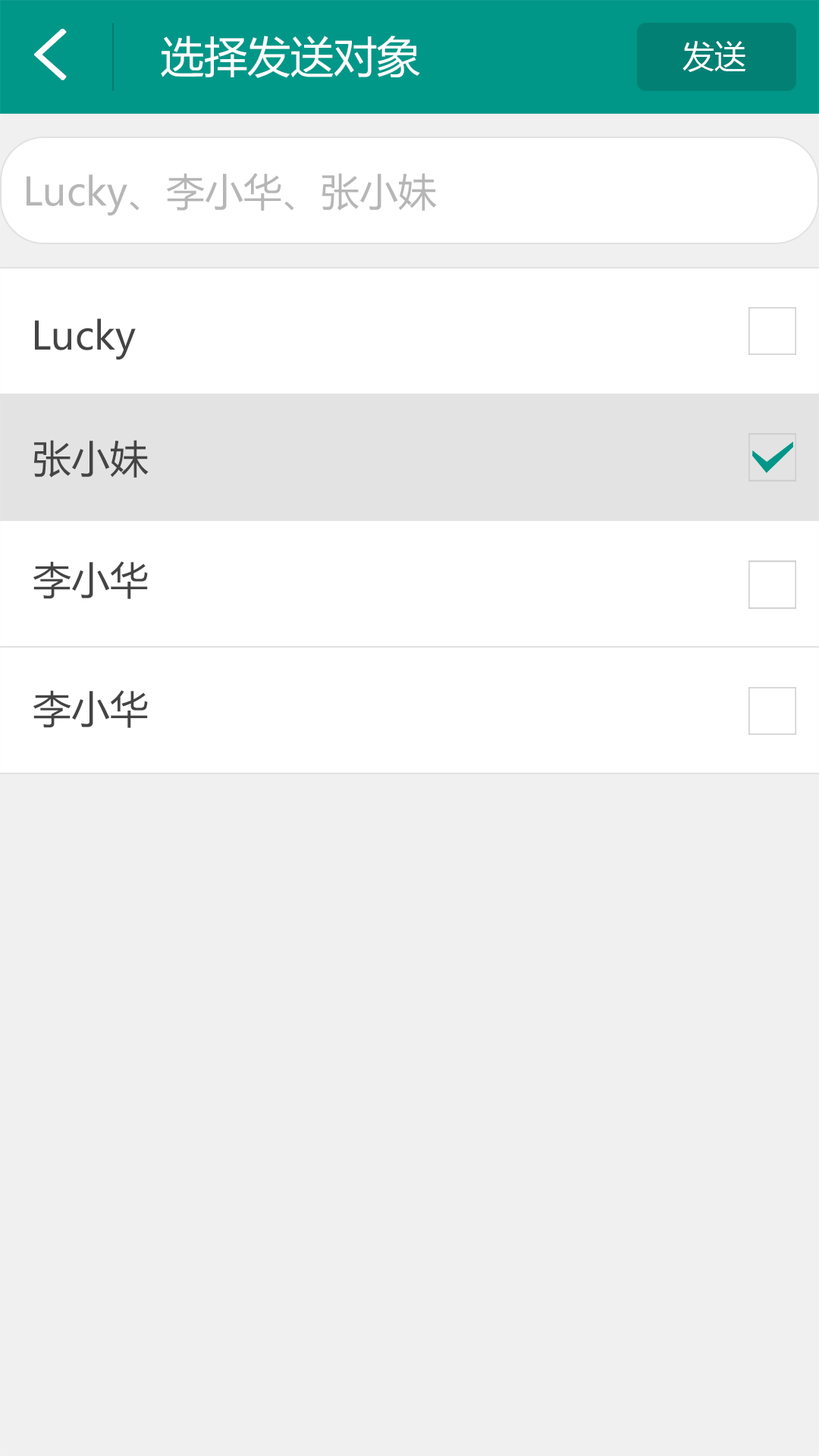
<style>
.page{position:relative;width:819px;height:1456px;background:#f0f0f0}
.page>*{position:absolute;margin:0}
.t1{font:70.5px "SimHei";color:#ffffff;font-weight:bold}
.t2{font:43.2px "MicrosoftYaHei";color:#ffffff}
.t3{font:31.8px "MicrosoftYaHei";color:#ffffff}
.t4{font:38.7px "MicrosoftYaHei";color:#b6b6b6}
.t5{font:38.7px "MicrosoftYaHei";color:#444444}
</style>
<div class="page">
<p class="t1" style="left:34px;top:29px;width:33px;height:51px">&lt;</p>
<p class="t2" style="left:161px;top:36px;width:259px;height:42px">选择发送对象</p>
<p class="t3" style="left:682px;top:41px;width:64px;height:31px">发送</p>
<p class="t4" style="left:27px;top:173px;width:410px;height:43px">Lucky、李小华、张小妹</p>
<p class="t5" style="left:35px;top:318px;width:101px;height:42px">Lucky</p>
<p class="t5" style="left:34px;top:440px;width:115px;height:38px">张小妹</p>
<p class="t5" style="left:33px;top:561px;width:115px;height:38px">李小华</p>
<p class="t5" style="left:33px;top:690px;width:115px;height:38px">李小华</p>
</div>
